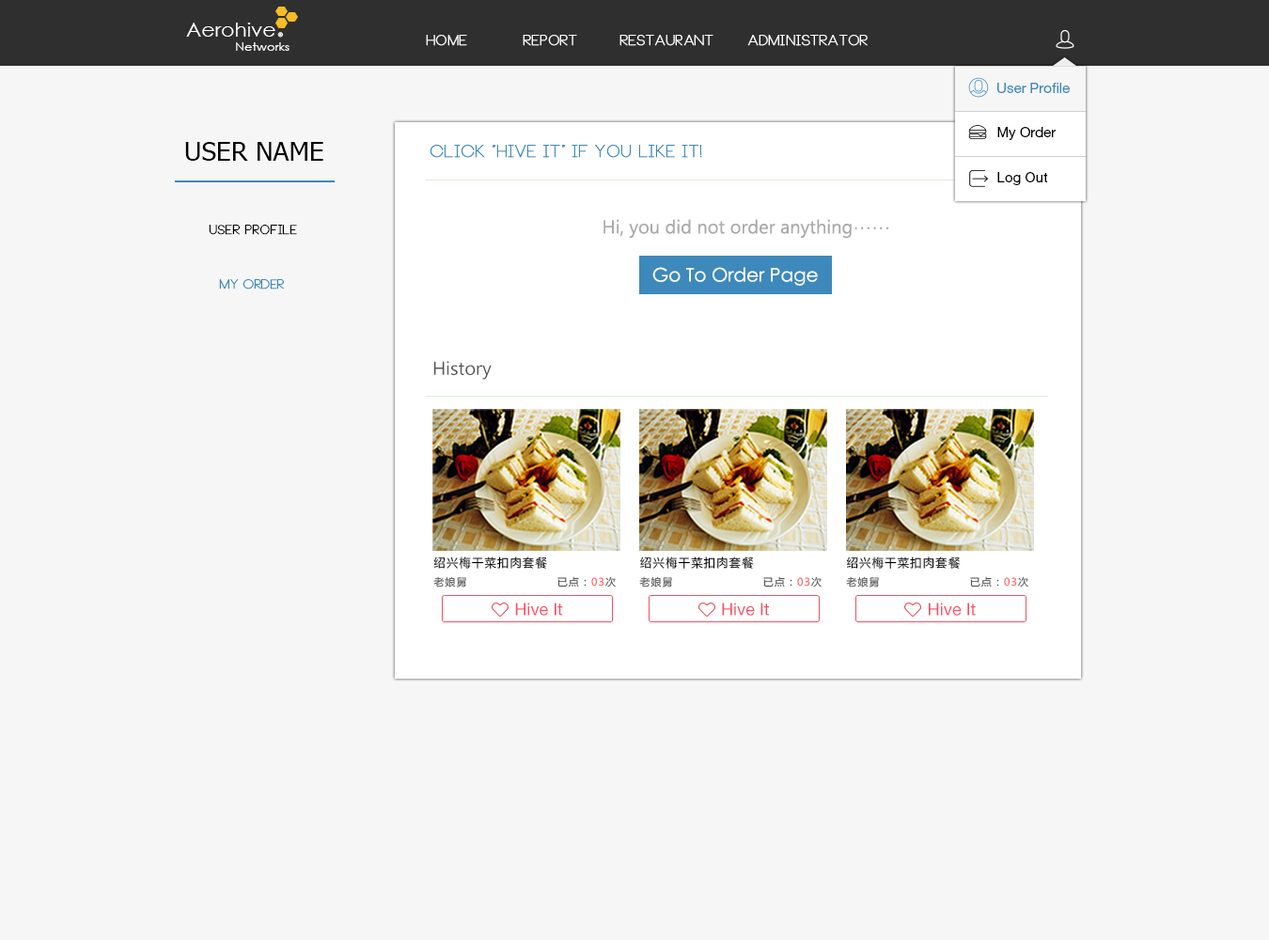
<style>
.page{position:relative;width:1269px;height:940px;background:#f6f6f6}
.page>*{position:absolute;margin:0}
.t1{font:19.3px "CenturyGothic";color:#ffffff;scale:1.07 1}
.t2{font:5.8px "CenturyGothic";color:#ffffff;scale:1.07 1}
.t3{font:14.1px "Neou-Thin";color:#ffffff;font-weight:bold}
.t4{font:11.6px "CenturyGothic";color:#ffffff;scale:1.07 1}
.t5{font:14.1px "HelveticaNeueLTPro-Roman"}
.t6{font:14.1px "HelveticaNeueLTPro-Roman";color:#3d89bc}
.t7{font:14.1px "HelveticaNeueLTPro-Roman";color:#000000}
.t8{font:26.3px "Tahoma";color:#000000;text-transform:uppercase}
.t9{font:16.9px "Neou-Thin";color:#3d89bc;font-weight:bold}
.t10{font:18.8px "MicrosoftTaiLe";color:#aaaaaa}
.t11{font:12.6px "Neou-Thin";color:#000000;font-weight:bold}
.t12{font:18.8px "CenturyGothic";color:#fffefe}
.t13{font:12.6px "Neou-Thin";color:#3d89bc;font-weight:bold}
.t14{font:18.8px "MicrosoftTaiLe";color:#555555}
.t15{font:11.6px "MicrosoftYaHei";letter-spacing:0.1em;color:#000000}
.t16{font:10.3px "MicrosoftYaHei";letter-spacing:0.1em;color:#555555}
.t17{font:10.3px "MicrosoftYaHei";letter-spacing:0.1em;color:#fd5c63}
.t18{font:17.1px "HelveticaNeueLTPro-Roman";color:#f74d61}
</style>
<div class="page">
<p class="t1" style="left:186px;top:23px;width:89px;height:14px">Aerohive</p>
<p class="t2" style="left:277px;top:32px;width:6px;height:6px">®</p>
<p class="t3" style="left:426px;top:35px;width:41px;height:11px">Home</p>
<p class="t3" style="left:523px;top:35px;width:54px;height:11px">Report</p>
<p class="t3" style="left:619px;top:35px;width:94px;height:11px">Restaurant</p>
<p class="t3" style="left:747px;top:35px;width:120px;height:11px">Administrator</p>
<p class="t4" style="left:236px;top:42px;width:53px;height:9px">Networks</p>
<p class="t5" style="left:996px;top:83px;width:74px;height:10px">User Profile</p>
<p class="t6" style="left:997px;top:83px;width:73px;height:10px">User Profile</p>
<p class="t7" style="left:997px;top:127px;width:59px;height:13px">My Order</p>
<p class="t8" style="left:185px;top:142px;width:138px;height:19px">user name</p>
<p class="t9" style="left:430px;top:145px;width:272px;height:13px">Click “Hive It” if you like it!</p>
<p class="t7" style="left:997px;top:172px;width:51px;height:13px">Log Out</p>
<p class="t10" style="left:603px;top:219px;width:286px;height:20px">Hi, you did not order anything……</p>
<p class="t11" style="left:209px;top:225px;width:88px;height:10px">user profile</p>
<p class="t12" style="left:652px;top:267px;width:166px;height:19px">Go To Order Page</p>
<p class="t13" style="left:219px;top:279px;width:65px;height:10px">my order</p>
<p class="t13" style="left:219px;top:279px;width:65px;height:10px">my order</p>
<p class="t14" style="left:433px;top:361px;width:59px;height:19px">History</p>
<p class="t15" style="left:433px;top:556px;width:114px;height:13px">绍兴梅干菜扣肉套餐</p>
<p class="t15" style="left:640px;top:556px;width:114px;height:13px">绍兴梅干菜扣肉套餐</p>
<p class="t15" style="left:846px;top:556px;width:115px;height:13px">绍兴梅干菜扣肉套餐</p>
<p class="t16" style="left:433px;top:576px;width:183px;height:11px">老娘舅                      已点：<span class="t17">03</span>次</p>
<p class="t16" style="left:639px;top:576px;width:182px;height:11px">老娘舅                      已点：<span class="t17">03</span>次</p>
<p class="t16" style="left:846px;top:576px;width:182px;height:11px">老娘舅                      已点：<span class="t17">03</span>次</p>
<p class="t18" style="left:515px;top:602px;width:48px;height:14px">Hive It</p>
<p class="t18" style="left:722px;top:602px;width:47px;height:14px">Hive It</p>
<p class="t18" style="left:929px;top:602px;width:47px;height:14px">Hive It</p>
</div>
